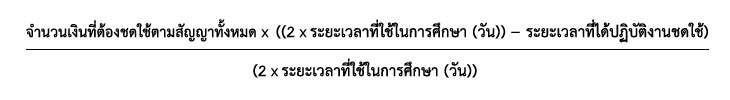
<style>
.page{position:relative;width:730px;height:100px;background:#ffffff}
.page>*{position:absolute;margin:0}
.t1{font:22px "THSarabunPSK-Bold";color:#000000}
.t2{font:21px "THSarabunPSK-Bold";color:#000000}
.t3{font:16px "THSarabunPSK-Bold";color:#000000}
</style>
<div class="page">
<p class="t1" style="left:26px;top:19px;width:682px;height:24px"><span class="t2"> จำนวนเงินที่ต้องชดใช้ตามสัญญาทั้งหมด </span><span class="t3">X  </span>((2 <span class="t3">X </span>ระยะเวลาที่ใช้ในการศึกษา (วัน))    ระยะเวลาที่ได้ปฏิบัติงานชดใช้)</p>
<p class="t1" style="left:253px;top:58px;width:224px;height:20px">(2 <span class="t3">X </span>ระยะเวลาที่ใช้ในการศึกษา (วัน))</p>
</div>
